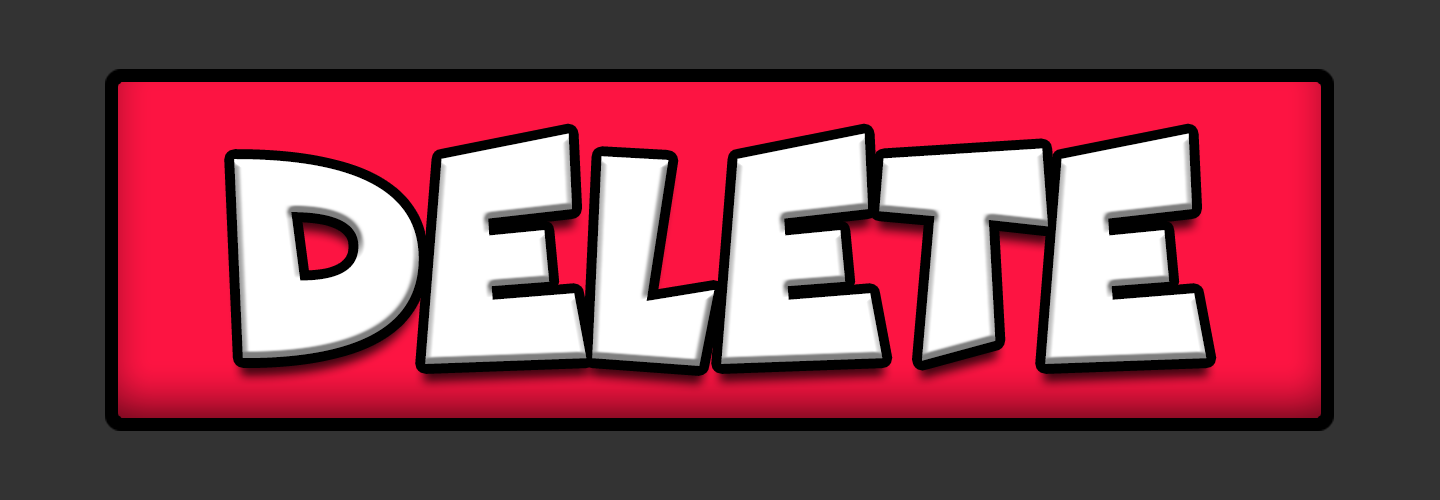
<style>
.page{position:relative;width:1440px;height:500px;background:#333333}
.page>*{position:absolute;margin:0}
.t1{font:290.6px "Funhouse";color:#ffffff;scale:0.95 1}
</style>
<div class="page">
<p class="t1" style="left:234px;top:133px;width:973px;height:233px">DELETE</p>
</div>
